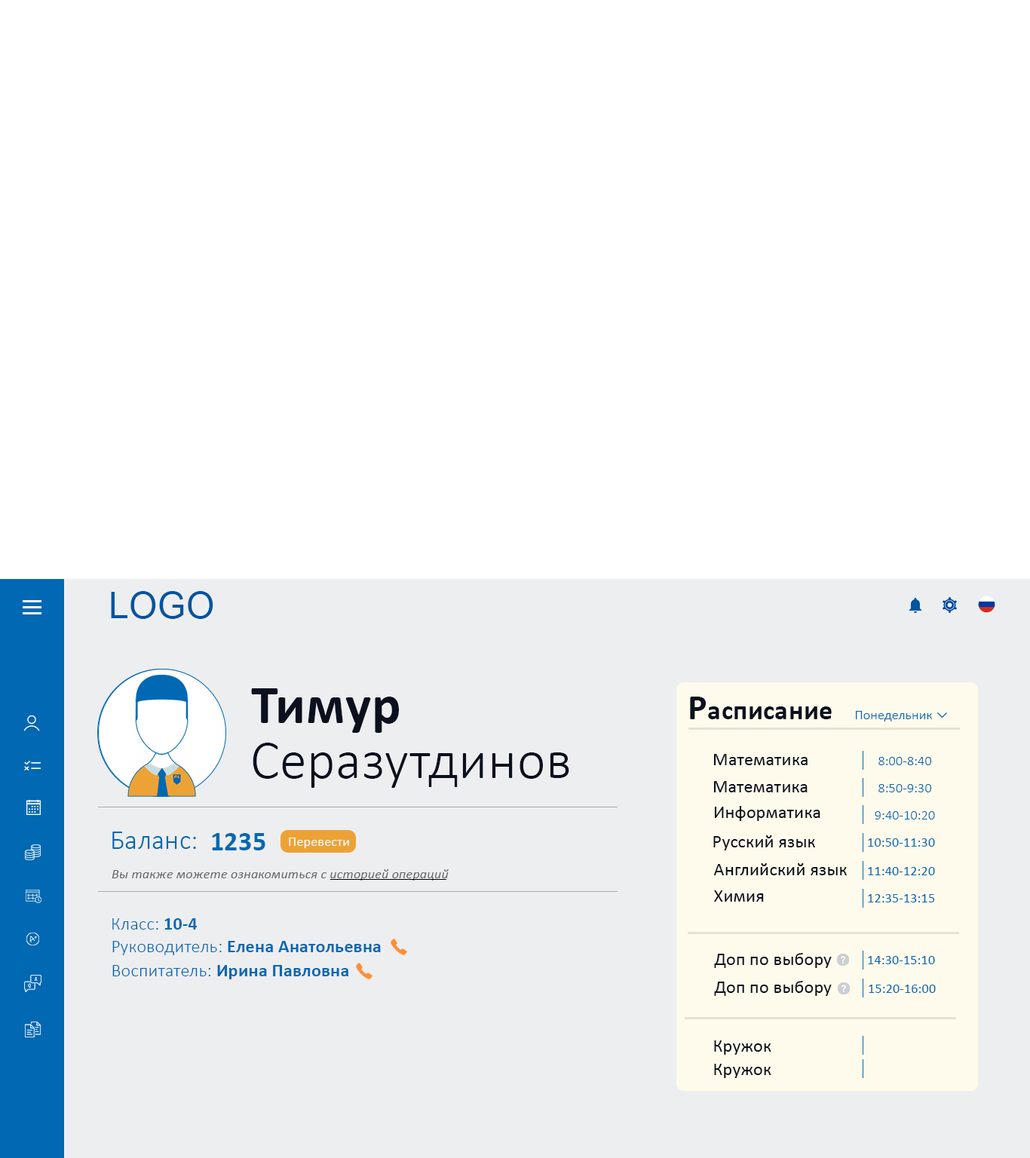
<style>
.page{position:relative;width:1030px;height:1158px;background:#ffffff}
.page>*{position:absolute;margin:0}
.t1{font:36.2px "ArialMT";letter-spacing:0.01em;color:#00549f}
.t2{font:54.3px "Calibri-Bold";letter-spacing:0.01em;color:#0a101d}
.t3{font:27.1px "Calibri-Bold";letter-spacing:0.01em;color:#0a101d}
.t4{font:36.2px "Calibri-Bold";letter-spacing:0.01em;color:#0a101d}
.t5{font:13.6px "Calibri-Light";letter-spacing:0.01em;color:#0168b3}
.t6{font:54.3px "Calibri-Light";letter-spacing:0.01em;color:#0a101d}
.t7{font:18.1px "Calibri";letter-spacing:0.01em;color:#0a101d}
.t8{font:22.6px "Calibri";letter-spacing:0.01em;color:#0a101d}
.t9{font:27.1px "Calibri-Light";letter-spacing:0.01em;color:#0168b3}
.t10{font:27.1px "Calibri-Bold";letter-spacing:0.01em;color:#0168b3}
.t11{font:13.6px "Calibri";letter-spacing:0.01em;color:#ffffff}
.t12{font:13.6px "Calibri";letter-spacing:0.01em;color:#0168b3}
.t13{font:13.6px "Calibri-Italic";letter-spacing:0.01em;color:#686868}
.t14{font:18.1px "Calibri-Light";letter-spacing:0.01em;color:#0168b3}
.t15{font:18.1px "Calibri-Bold";letter-spacing:0.01em;color:#0168b3}
</style>
<div class="page">
<p class="t1" style="left:111px;top:591px;width:102px;height:28px">LOGO</p>
<p class="t2" style="left:251px;top:688px;width:148px;height:45px">Тимур</p>
<p class="t3" style="left:690px;top:697px;width:142px;height:22px"><span class="t4">Р</span>асписание</p>
<p class="t5" style="left:856px;top:711px;width:76px;height:10px">Понедельник</p>
<p class="t6" style="left:253px;top:743px;width:316px;height:45px">Серазутдинов</p>
<p class="t7" style="left:713px;top:754px;width:94px;height:11px">Математика</p>
<p class="t5" style="left:878px;top:757px;width:53px;height:8px">8:00-8:40</p>
<p class="t7" style="left:713px;top:781px;width:94px;height:11px"><span class="t8"> </span>Математика</p>
<p class="t5" style="left:878px;top:784px;width:53px;height:8px">8:50-9:30</p>
<p class="t7" style="left:714px;top:806px;width:106px;height:15px"><span class="t8"> </span>Информатика</p>
<p class="t5" style="left:874px;top:811px;width:61px;height:8px">9:40-10:20</p>
<p class="t9" style="left:112px;top:832px;width:84px;height:17px">Баланс:</p>
<p class="t10" style="left:212px;top:833px;width:53px;height:17px">1235</p>
<p class="t11" style="left:289px;top:838px;width:60px;height:10px">Перевести</p>
<p class="t7" style="left:713px;top:835px;width:102px;height:15px">Русский язык</p>
<p class="t12" style="left:868px;top:838px;width:67px;height:9px">10:50-11:30</p>
<p class="t13" style="left:112px;top:869px;width:337px;height:12px">Вы также можете ознакомиться с историей операций</p>
<p class="t7" style="left:713px;top:863px;width:134px;height:12px">Английский язык</p>
<p class="t12" style="left:868px;top:867px;width:67px;height:8px">11:40-12:20</p>
<p class="t7" style="left:714px;top:890px;width:50px;height:12px">Химия</p>
<p class="t12" style="left:868px;top:894px;width:67px;height:8px">12:35-13:15</p>
<p class="t14" style="left:112px;top:918px;width:86px;height:12px">Класс: <span class="t15">10-4</span></p>
<p class="t15" style="left:112px;top:941px;width:269px;height:14px"><span class="t14">Руководитель:</span> Елена Анатольевна</p>
<p class="t7" style="left:714px;top:953px;width:118px;height:15px">Доп по выбору</p>
<p class="t15" style="left:112px;top:965px;width:236px;height:14px"><span class="t14">Воспитатель: </span>Ирина Павловна</p>
<p class="t12" style="left:868px;top:956px;width:67px;height:8px">14:30-15:10</p>
<p class="t7" style="left:714px;top:981px;width:118px;height:15px">Доп по выбору</p>
<p class="t12" style="left:868px;top:985px;width:68px;height:8px">15:20-16:00</p>
<p class="t7" style="left:714px;top:1040px;width:57px;height:15px">Кружок</p>
<p class="t7" style="left:714px;top:1064px;width:57px;height:14px">Кружок</p>
</div>
